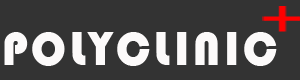
<style>
.page{position:relative;width:300px;height:80px;background:#333333}
.page>*{position:absolute;margin:0}
.t1{font:49px "Bauhaus93";letter-spacing:0.08em;color:#fcfafa;scale:0.94 1}
</style>
<div class="page">
<p class="t1" style="left:4px;top:32px;width:273px;height:34px">POLYCLINIC</p>
</div>
